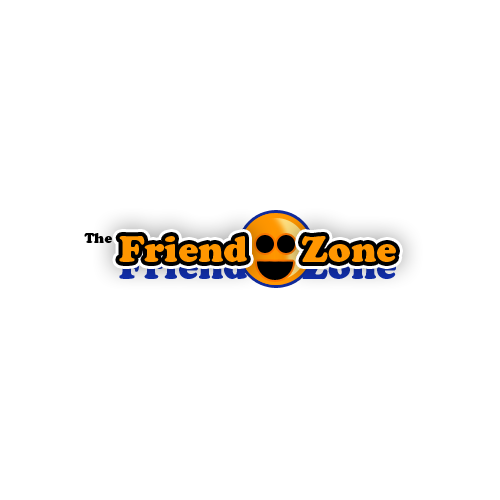
<style>
.page{position:relative;width:500px;height:500px;background:#ffffff}
.page>*{position:absolute;margin:0}
.t1{font:14px "CooperBlackStd";color:#000000}
.t2{font:36px "CooperBlackStd";color:#ff9600}
.t3{font:36px "CooperBlackStd"}
</style>
<div class="page">
<p class="t1" style="left:84px;top:233px;width:28px;height:10px">The</p>
<p class="t2" style="left:119px;top:236px;width:128px;height:26px">Friend</p>
<p class="t2" style="left:119px;top:236px;width:128px;height:26px">Friend</p>
<p class="t2" style="left:302px;top:236px;width:94px;height:27px">Zone</p>
<p class="t2" style="left:302px;top:236px;width:94px;height:27px">Zone</p>
<p class="t3" style="left:119px;top:253px;width:128px;height:26px">Friend</p>
<p class="t3" style="left:302px;top:253px;width:94px;height:27px">Zone</p>
</div>
